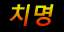
<style>
.page{position:relative;width:64px;height:32px;background:#000000}
.page>*{position:absolute;margin:0}
.t1{font:23px "MalgunGothicBold";font-style:italic}
</style>
<div class="page">
<p class="t1" style="left:9px;top:4px;width:45px;height:22px">치명</p>
</div>
